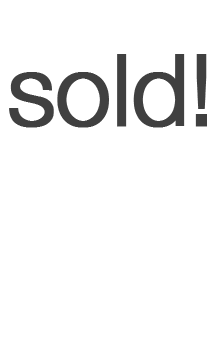
<style>
.page{position:relative;width:220px;height:350px;background:#ffffff}
.page>*{position:absolute;margin:0}
.t1{font:100px "HelveticaNeue-Light";letter-spacing:-0.02em;color:#404040;font-weight:bold}
</style>
<div class="page">
<p class="t1" style="left:9px;top:54px;width:198px;height:74px">sold!</p>
</div>
